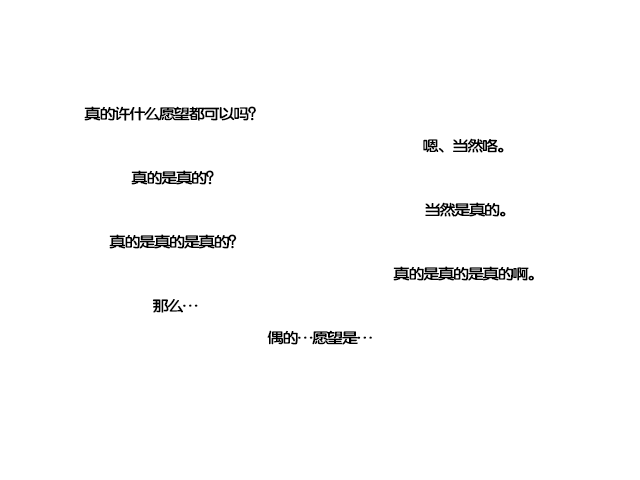
<style>
.page{position:relative;width:640px;height:480px;background:#ffffff}
.page>*{position:absolute;margin:0}
.t1{font:15px "FZY4K--GBK1-0";letter-spacing:-0.13em;color:#000000;scale:1.14 1}
</style>
<div class="page">
<p class="t1" style="left:84px;top:106px;width:172px;height:15px">真的许什么愿望都可以吗？</p>
<p class="t1" style="left:423px;top:138px;width:81px;height:15px">嗯、当然咯。</p>
<p class="t1" style="left:131px;top:170px;width:83px;height:15px">真的是真的？</p>
<p class="t1" style="left:425px;top:202px;width:81px;height:15px">当然是真的。</p>
<p class="t1" style="left:109px;top:234px;width:128px;height:15px">真的是真的是真的？</p>
<p class="t1" style="left:393px;top:266px;width:141px;height:15px">真的是真的是真的啊。</p>
<p class="t1" style="left:152px;top:299px;width:46px;height:14px">那么…</p>
<p class="t1" style="left:267px;top:330px;width:105px;height:15px">偶的…愿望是…</p>
</div>
